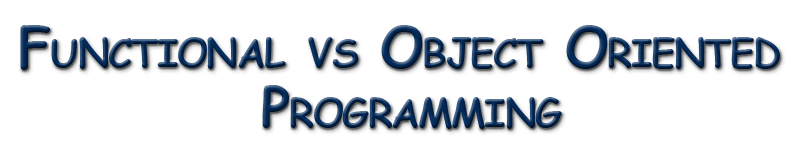
<style>
.page{position:relative;width:800px;height:150px;background:#ffffff}
.page>*{position:absolute;margin:0}
.t1{font:55px/60px "ComicSansMS-Bold";letter-spacing:-0.025em;font-variant:small-caps}
</style>
<div class="page">
<p class="t1" style="left:20px;top:25px;width:760px;height:104px;text-align:center">Functional vs Object Oriented <br>Programming</p>
</div>
